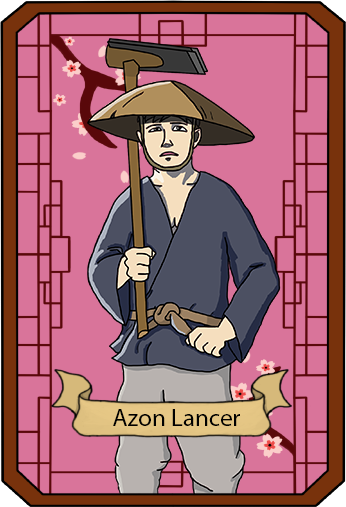
<style>
.page{position:relative;width:346px;height:507px;background:#d9749a}
.page>*{position:absolute;margin:0}
.t1{font:25px "MyriadPro-Regular";color:#000000}
</style>
<div class="page">
<p class="t1" style="left:113px;top:409px;width:127px;height:17px">Azon Lancer</p>
</div>
